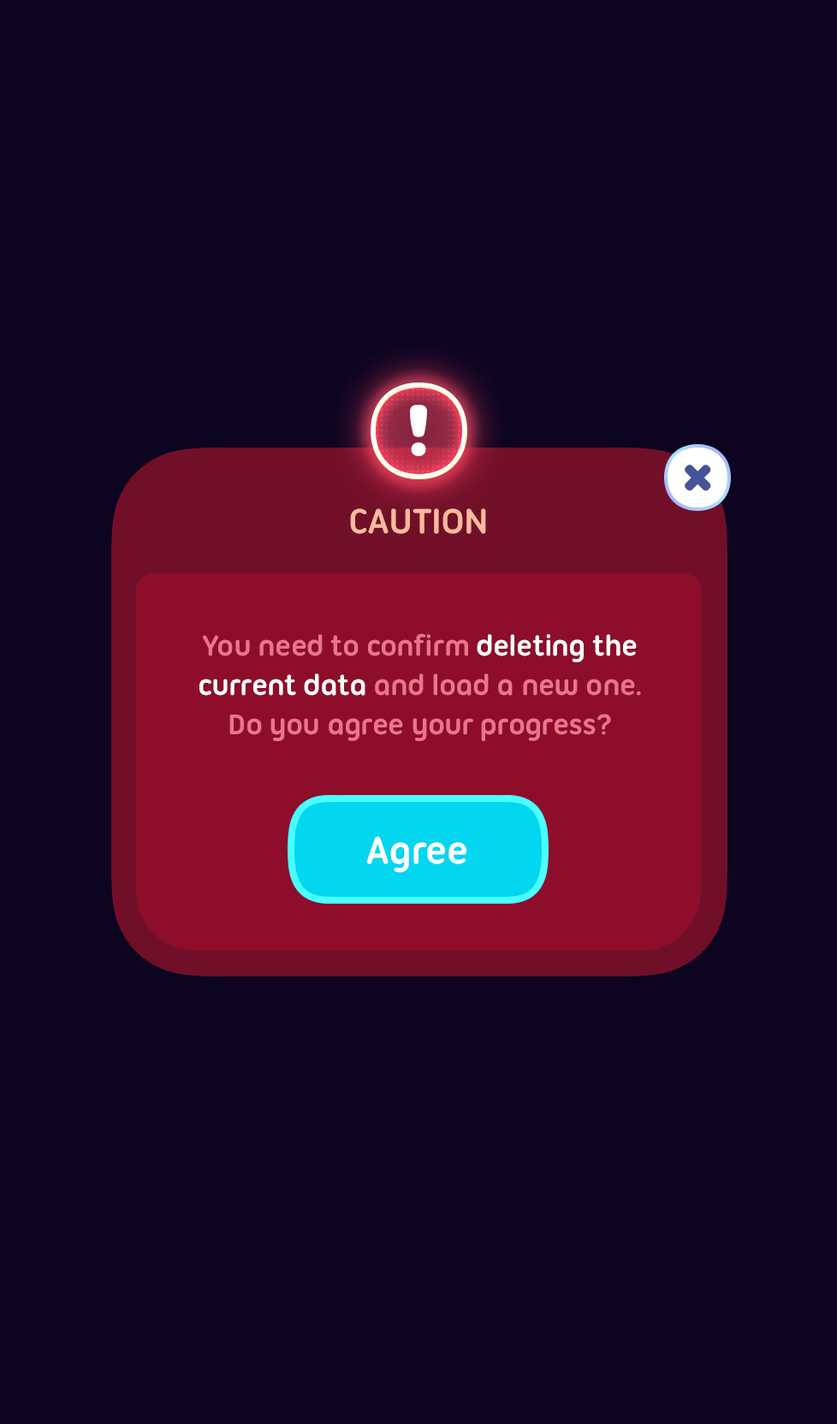
<style>
.page{position:relative;width:837px;height:1424px;background:#0d0420}
.page>*{position:absolute;margin:0}
.t1{font:37.7px "UbuntuTitling-Bold";letter-spacing:-0.025em;color:#ffb99d;text-transform:uppercase}
.t2{font:30.8px/39.4px "UbuntuTitling-Bold";letter-spacing:-0.025em;color:#ea7589}
.t3{font:30.8px/39.4px "UbuntuTitling-Bold";letter-spacing:-0.025em;color:#ffffff}
.t4{font:41.1px "UbuntuTitling-Bold";letter-spacing:-0.025em;color:#ffffff}
</style>
<div class="page">
<p class="t1" style="left:350px;top:508px;width:136px;height:26px">Caution</p>
<p class="t2" style="left:199px;top:633px;width:442px;height:108px;text-align:center">You need to confirm <span class="t3">deleting the<br>current data</span> and load a new one.<br>Do you agree your progress?</p>
<p class="t4" style="left:366px;top:836px;width:101px;height:37px">Agree</p>
</div>
